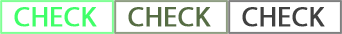
<style>
.page{position:relative;width:342px;height:34px;background:#ffffff}
.page>*{position:absolute;margin:0}
.t1{font:27.8px "MyriadPro-Regular";color:#40ff68;font-weight:bold}
.t2{font:27.8px "MyriadPro-Regular";color:#566d44;font-weight:bold}
.t3{font:27.8px "MyriadPro-Regular";color:#404040;font-weight:bold}
</style>
<div class="page">
<p class="t1" style="left:14px;top:7px;width:83px;height:20px">CHECK</p>
<p class="t2" style="left:128px;top:7px;width:83px;height:20px">CHECK</p>
<p class="t3" style="left:242px;top:7px;width:83px;height:20px">CHECK</p>
</div>
